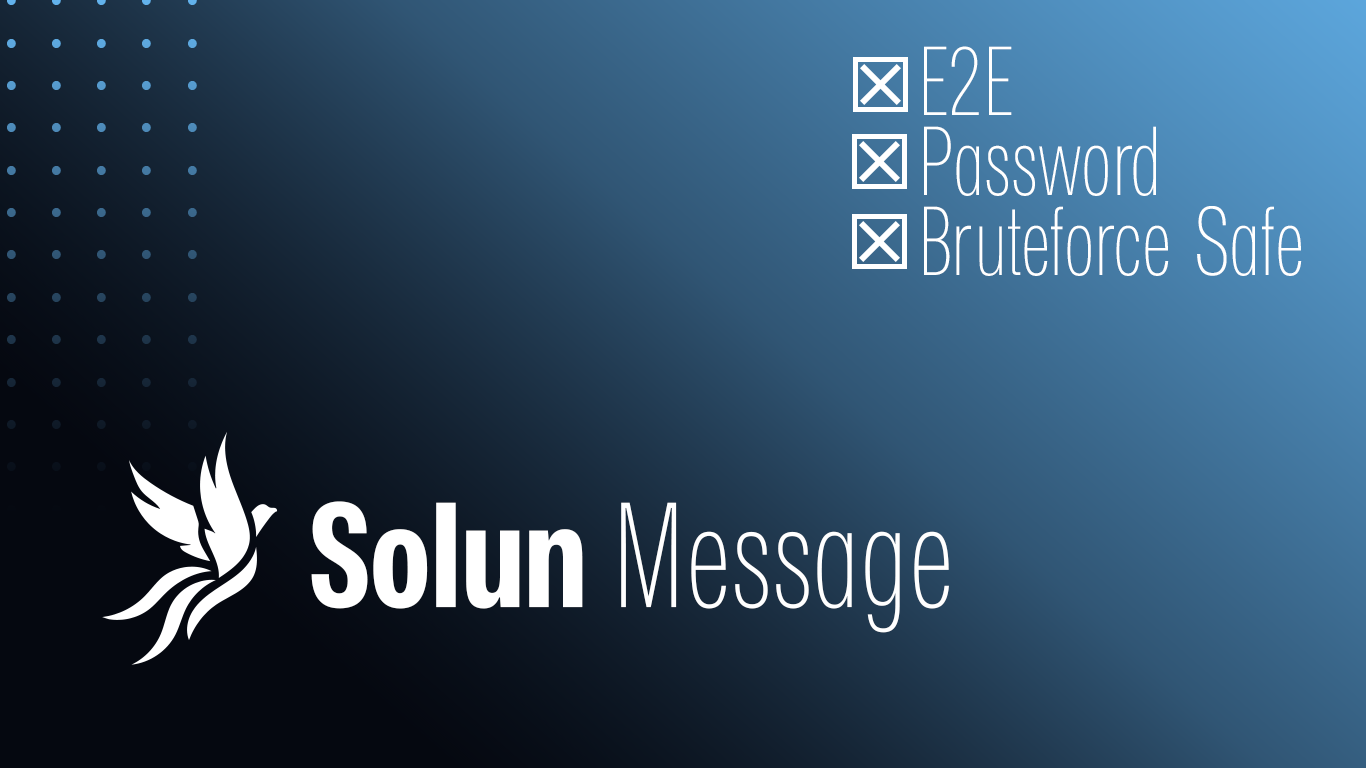
<style>
.page{position:relative;width:1366px;height:768px}
.page>*{position:absolute;margin:0}
.t1{font:93.8px/80px "MonaSans-UltraLightNarrow";color:#ffffff}
.t2{font:143px "MonaSans-UltraLightNarrow";color:#ffffff}
.t3{font:143px "MonaSans-BoldNarrow";color:#ffffff}
</style>
<div class="page">
<p class="t1" style="left:924px;top:46px;width:378px;height:230px">E2E<br>Password<br>Bruteforce Safe</p>
<p class="t2" style="left:311px;top:501px;width:638px;height:132px"><span class="t3">Solun </span>Message</p>
</div>
